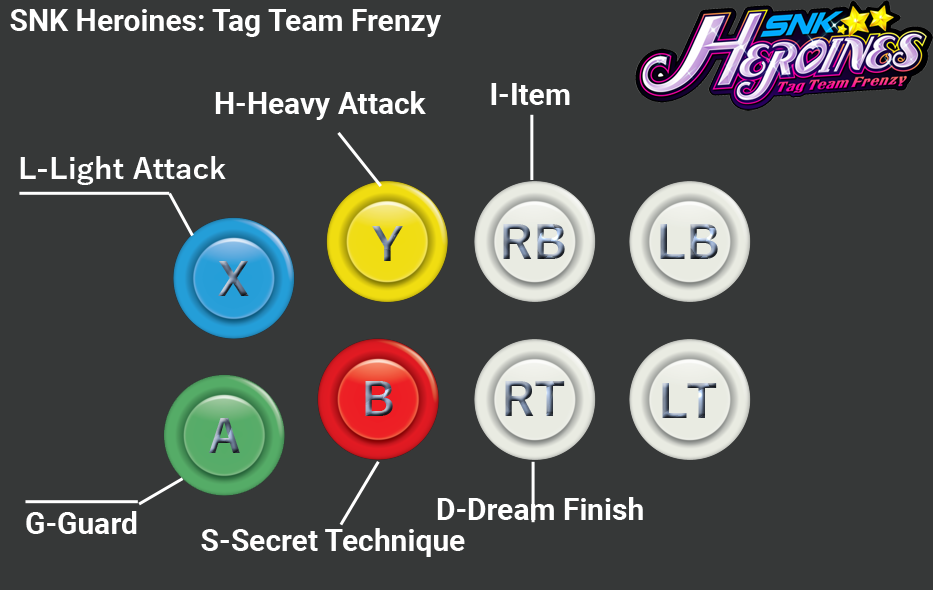
<style>
.page{position:relative;width:933px;height:590px;background:#363838}
.page>*{position:absolute;margin:0}
.t1{font:30px "Roboto-Bold";color:#ffffff}
.t2{font:30px "YuGothic-Bold";color:#ffffff}
</style>
<div class="page">
<p class="t1" style="left:10px;top:9px;width:431px;height:28px">SNK Heroines: Tag Team Frenzy</p>
<p class="t1" style="left:491px;top:83px;width:79px;height:22px">I-Item</p>
<p class="t1" style="left:215px;top:91px;width:211px;height:29px">H-Heavy Attack</p>
<p class="t2" style="left:20px;top:156px;width:206px;height:29px">L-Light Attack</p>
<p class="t1" style="left:437px;top:497px;width:206px;height:23px">D-Dream Finish</p>
<p class="t1" style="left:26px;top:511px;width:111px;height:23px">G-Guard</p>
<p class="t1" style="left:201px;top:528px;width:264px;height:29px">S-Secret Technique</p>
</div>
